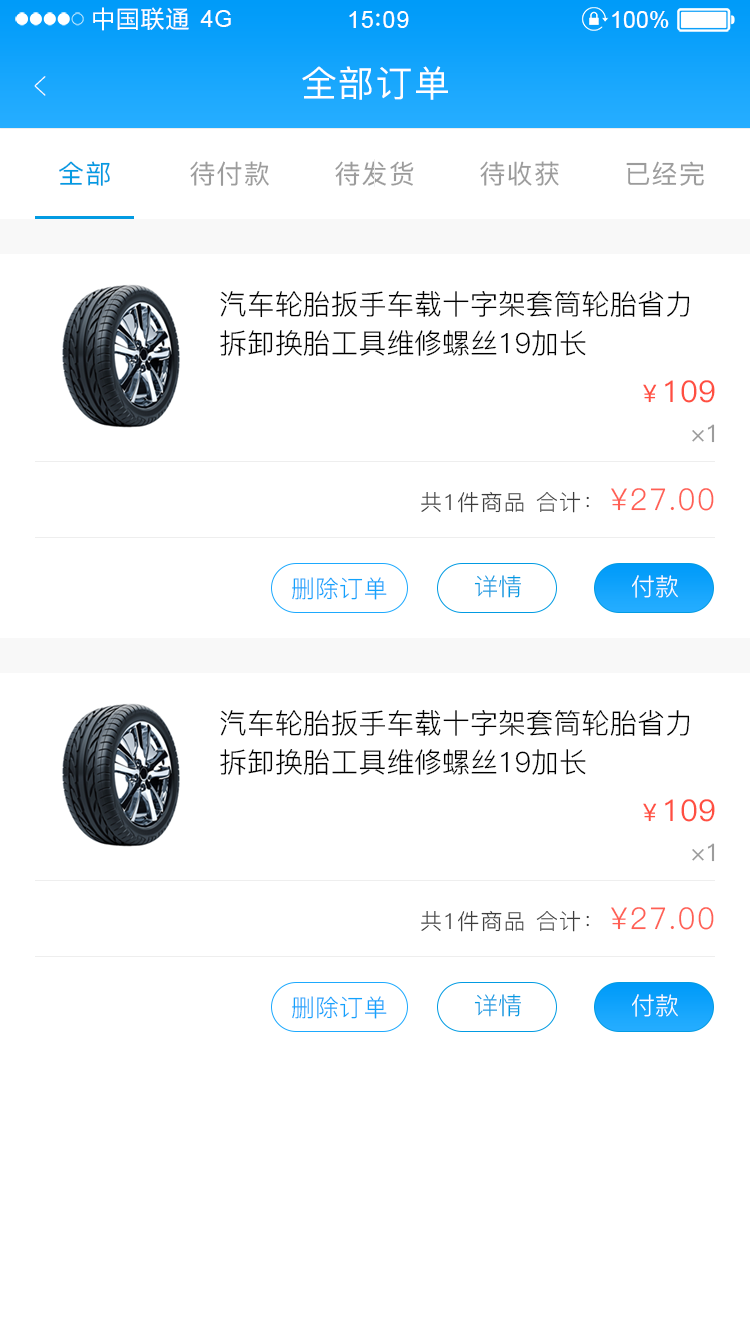
<style>
.page{position:relative;width:750px;height:1334px;background:#ffffff}
.page>*{position:absolute;margin:0}
.t1{font:23.4px "MicrosoftYaHei";letter-spacing:0.06em;color:#ffffff}
.t2{font:23.4px "ArialMT";letter-spacing:0.02em;color:#ffffff}
.t3{font:23.4px "ArialMT";letter-spacing:0.04em;color:#ffffff}
.t4{font:23.4px "ArialMT";color:#ffffff}
.t5{font:39px "PingFang-SC-ExtraLight";letter-spacing:0.1em;color:#ffffff;scale:0.51 1}
.t6{font:36px "PingFang-SC-Medium";letter-spacing:0.05em;color:#ffffff}
.t7{font:26.1px "PingFang-SC-Medium";letter-spacing:0.05em;color:#029be2}
.t8{font:26.1px "PingFang-SC-Medium";letter-spacing:0.05em;color:#9c9c9c}
.t9{font:28px/39px "PingFang-SC-Regular";color:#000000}
.t10{font:30px "PingFang-SC-Medium";color:#ff4f41}
.t11{font:24px "PingFang-SC-Medium";color:#ff4f41}
.t12{font:24px "PingFang-SC-Medium";color:#9c9c9c}
.t13{font:22px "PingFang-SC-Regular";letter-spacing:0.05em;color:#3c3c3c}
.t14{font:30px "PingFang-SC-Regular";letter-spacing:0.05em;color:#ff5f53}
.t15{font:24px "PingFang-SC-Regular";color:#12a3fc}
.t16{font:24px "PingFang-SC-Regular";color:#029be2}
.t17{font:24px "PingFang-SC-Regular";color:#ffffff}
</style>
<div class="page">
<p class="t1" style="left:93px;top:7px;width:96px;height:24px">中国联通</p>
<p class="t2" style="left:200px;top:10px;width:31px;height:17px">4G</p>
<p class="t3" style="left:349px;top:11px;width:60px;height:17px">15 09</p>
<p class="t4" style="left:612px;top:11px;width:57px;height:17px">100%</p>
<p class="t5" style="left:34px;top:76px;width:12px;height:20px;rotate:180deg">&gt;</p>
<p class="t6" style="left:302px;top:66px;width:146px;height:34px">全部订单</p>
<p class="t7" style="left:59px;top:161px;width:51px;height:25px">全部</p>
<p class="t8" style="left:190px;top:161px;width:79px;height:25px">待付款</p>
<p class="t8" style="left:335px;top:161px;width:79px;height:25px">待发货</p>
<p class="t8" style="left:480px;top:161px;width:79px;height:25px">待收获</p>
<p class="t8" style="left:626px;top:161px;width:78px;height:25px">已经完</p>
<p class="t9" style="left:220px;top:290px;width:470px;height:66px">汽车轮胎扳手车载十字架套筒轮胎省力<br>拆卸换胎工具维修螺丝19加长</p>
<p class="t10" style="left:643px;top:380px;width:72px;height:23px"><span class="t11">￥</span>109</p>
<p class="t12" style="left:692px;top:424px;width:23px;height:19px">×1</p>
<p class="t13" style="left:421px;top:491px;width:103px;height:22px">共1件商品</p>
<p class="t13" style="left:536px;top:491px;width:53px;height:22px">合计：</p>
<p class="t14" style="left:611px;top:488px;width:103px;height:23px">¥27.00</p>
<p class="t15" style="left:292px;top:577px;width:95px;height:23px">删除订单</p>
<p class="t16" style="left:474px;top:575px;width:47px;height:23px">详情</p>
<p class="t17" style="left:632px;top:575px;width:46px;height:23px">付款</p>
<p class="t9" style="left:220px;top:709px;width:470px;height:66px">汽车轮胎扳手车载十字架套筒轮胎省力<br>拆卸换胎工具维修螺丝19加长</p>
<p class="t10" style="left:643px;top:799px;width:72px;height:23px"><span class="t11">￥</span>109</p>
<p class="t12" style="left:692px;top:843px;width:23px;height:19px">×1</p>
<p class="t13" style="left:421px;top:910px;width:103px;height:22px">共1件商品</p>
<p class="t13" style="left:536px;top:910px;width:53px;height:22px">合计：</p>
<p class="t14" style="left:611px;top:907px;width:103px;height:23px">¥27.00</p>
<p class="t15" style="left:292px;top:996px;width:95px;height:23px">删除订单</p>
<p class="t16" style="left:474px;top:994px;width:47px;height:23px">详情</p>
<p class="t17" style="left:632px;top:994px;width:46px;height:23px">付款</p>
</div>
